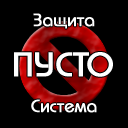
<style>
.page{position:relative;width:128px;height:128px;background:#000000}
.page>*{position:absolute;margin:0}
.t1{font:18px "BauhausC-Medium";color:#ffffff;font-weight:bold}
.t2{font:34px "BauhausC-Medium";color:#ffffff;font-weight:bold}
</style>
<div class="page">
<p class="t1" style="left:33px;top:13px;width:62px;height:16px">Защита</p>
<p class="t2" style="left:14px;top:52px;width:99px;height:25px">ПУСТО</p>
<p class="t1" style="left:31px;top:99px;width:66px;height:14px">Система</p>
</div>
